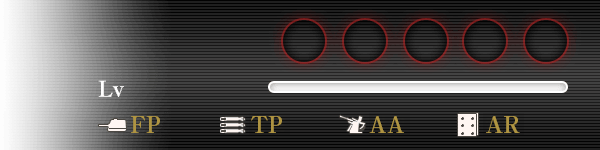
<style>
.page{position:relative;width:600px;height:150px}
.page>*{position:absolute;margin:0}
.t1{font:22px "RyuminPro-ExBold";color:#af9441}
</style>
<div class="page">
<p class="t1" style="left:131px;top:116px;width:29px;height:17px">FP</p>
<p class="t1" style="left:251px;top:116px;width:31px;height:17px">TP</p>
<p class="t1" style="left:369px;top:116px;width:35px;height:17px">AA</p>
<p class="t1" style="left:486px;top:116px;width:34px;height:17px">AR</p>
</div>
